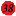
<style>
.page{position:relative;width:16px;height:16px;background:#ed1c24}
.page>*{position:absolute;margin:0}
.t1{font:11px "TimesNewRomanPSMT";color:#000000;font-style:italic}
</style>
<div class="page">
<p class="t1" style="left:2px;top:4px;width:12px;height:9px">38</p>
</div>
